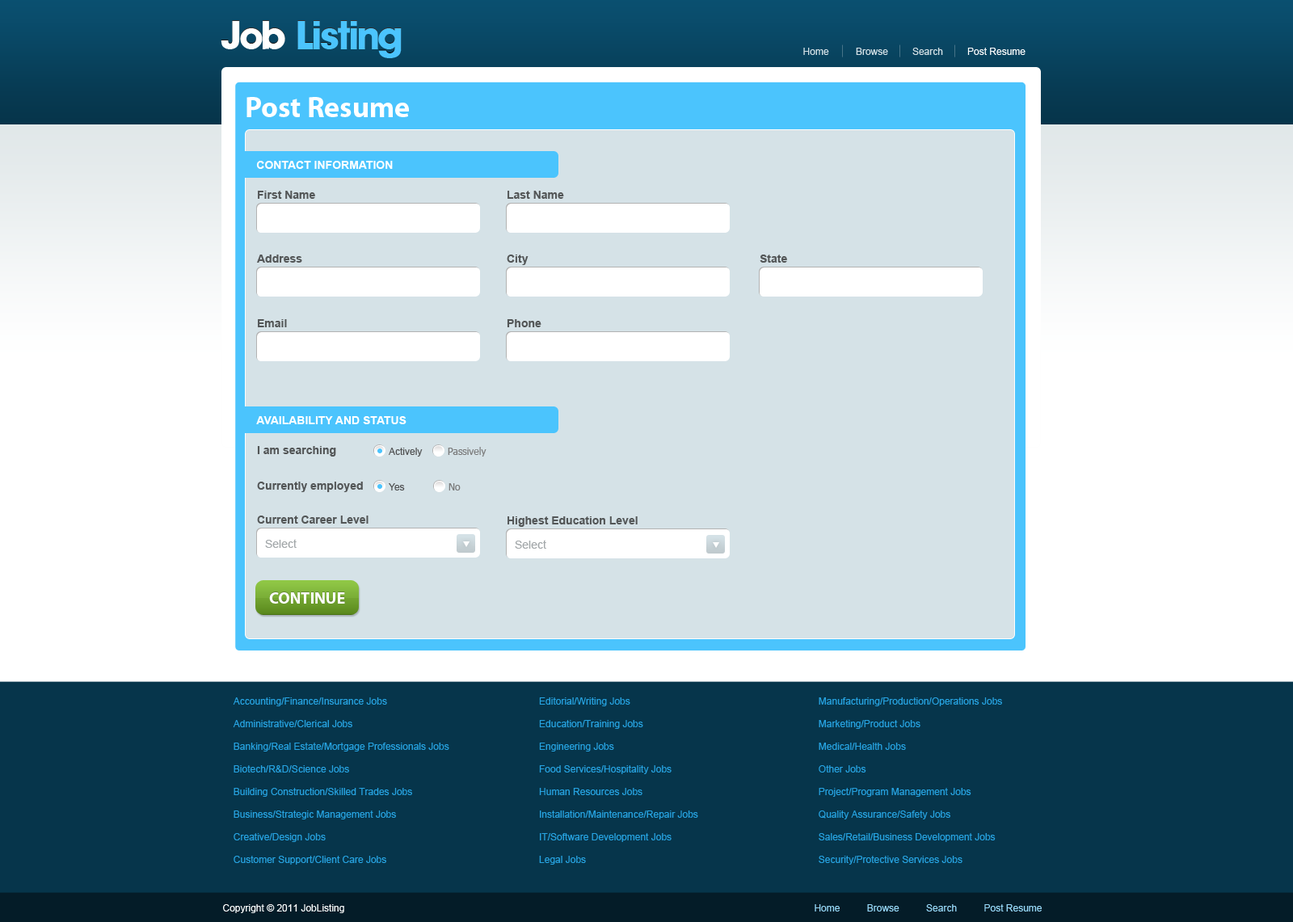
<style>
.page{position:relative;width:1293px;height:922px;background:#d5e2e7}
.page>*{position:absolute;margin:0}
.t1{font:38.8px "AvantGBold";color:#4bc4fd}
.t2{font:38.8px "AvantGBold";color:#ffffff}
.t3{font:9.7px "ArialMT";color:#d5e2e7}
.t4{font:9.7px "ArialMT";color:#ffffff}
.t5{font:29.1px "MyriadPro-Bold";color:#ffffff}
.t6{font:11.3px "Arial-BoldMT";color:#ffffff;text-transform:uppercase}
.t7{font:11.3px "Arial-BoldMT";color:#535657}
.t8{font:9.7px "ArialMT";color:#515253}
.t9{font:9.7px "Tahoma";color:#797979}
.t10{font:11.3px "ArialMT";color:#a3a8aa}
.t11{font:16.2px "MyriadPro-Bold";color:#ffffff;text-transform:uppercase}
.t12{font:9.7px/22.6px "ArialMT";color:#26a3e1}
.t13{font:9.7px "ArialMT";color:#98d9f8}
</style>
<div class="page">
<p class="t1" style="left:221px;top:20px;width:181px;height:37px"><span class="t2">Job </span>Listing</p>
<p class="t1" style="left:221px;top:21px;width:181px;height:37px"><span class="t2">Job </span>Listing</p>
<p class="t3" style="left:803px;top:48px;width:223px;height:7px">Home          Browse         Search         <span class="t4">Post Resume</span></p>
<p class="t5" style="left:246px;top:97px;width:163px;height:20px">Post Resume</p>
<p class="t6" style="left:256px;top:161px;width:137px;height:8px">Contact Information</p>
<p class="t7" style="left:258px;top:191px;width:57px;height:8px">First Name</p>
<p class="t7" style="left:508px;top:191px;width:56px;height:8px">Last Name</p>
<p class="t7" style="left:257px;top:255px;width:45px;height:8px">Address</p>
<p class="t7" style="left:507px;top:255px;width:22px;height:10px">City</p>
<p class="t7" style="left:760px;top:255px;width:27px;height:8px">State</p>
<p class="t7" style="left:258px;top:319px;width:29px;height:8px">Email</p>
<p class="t7" style="left:507px;top:319px;width:34px;height:8px">Phone</p>
<p class="t6" style="left:256px;top:416px;width:151px;height:8px">Availability and Status</p>
<p class="t7" style="left:257px;top:446px;width:79px;height:11px">I am searching</p>
<p class="t8" style="left:389px;top:448px;width:34px;height:9px">Actively</p>
<p class="t9" style="left:448px;top:447px;width:39px;height:10px">Passively</p>
<p class="t7" style="left:257px;top:482px;width:106px;height:10px">Currently employed</p>
<p class="t8" style="left:389px;top:483px;width:16px;height:8px">Yes</p>
<p class="t9" style="left:449px;top:483px;width:12px;height:8px">No</p>
<p class="t7" style="left:257px;top:516px;width:112px;height:8px">Current Career Level</p>
<p class="t7" style="left:508px;top:516px;width:130px;height:11px">Highest Education Level</p>
<p class="t10" style="left:265px;top:539px;width:32px;height:9px">Select</p>
<p class="t10" style="left:515px;top:540px;width:31px;height:9px">Select</p>
<p class="t11" style="left:269px;top:592px;width:76px;height:11px;opacity:0.34">continue</p>
<p class="t11" style="left:269px;top:592px;width:76px;height:12px">continue</p>
<p class="t12" style="left:233px;top:697px;width:216px;height:168px">Accounting/Finance/Insurance Jobs<br>    Administrative/Clerical Jobs<br>    Banking/Real Estate/Mortgage Professionals Jobs<br>    Biotech/R&amp;D/Science Jobs<br>    Building Construction/Skilled Trades Jobs<br>    Business/Strategic Management Jobs<br>    Creative/Design Jobs<br>    Customer Support/Client Care Jobs</p>
<p class="t12" style="left:539px;top:697px;width:159px;height:168px">Editorial/Writing Jobs<br>    Education/Training Jobs<br>    Engineering Jobs<br>    Food Services/Hospitality Jobs<br>    Human Resources Jobs<br>    Installation/Maintenance/Repair Jobs<br>    IT/Software Development Jobs<br>    Legal Jobs</p>
<p class="t12" style="left:819px;top:697px;width:183px;height:168px">Manufacturing/Production/Operations Jobs<br>    Marketing/Product Jobs<br>    Medical/Health Jobs<br>    Other Jobs<br>    Project/Program Management Jobs<br>    Quality Assurance/Safety Jobs<br>    Sales/Retail/Business Development Jobs<br>    Security/Protective Services Jobs</p>
<p class="t4" style="left:223px;top:904px;width:121px;height:9px">Copyright © 2011 JobListing</p>
<p class="t13" style="left:815px;top:904px;width:227px;height:8px">Home          Browse          Search          Post Resume</p>
</div>
